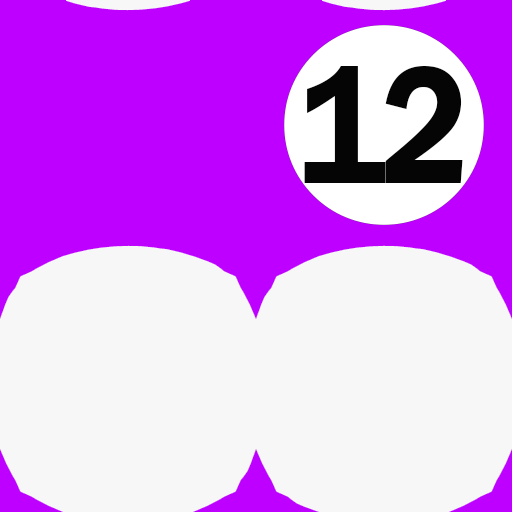
<style>
.page{position:relative;width:512px;height:512px;background:#f7f7f7}
.page>*{position:absolute;margin:0}
.t1{font:172.5px "FranklinGothic-Demi";letter-spacing:-0.05em;color:#060505;scale:0.87 1}
</style>
<div class="page">
<p class="t1" style="left:304px;top:66px;width:159px;height:117px">12</p>
</div>
